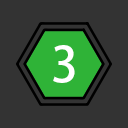
<style>
.page{position:relative;width:128px;height:128px;background:#333333}
.page>*{position:absolute;margin:0}
.t1{font:48px "AdobeHeitiStd-Regular";color:#ffffff}
</style>
<div class="page">
<p class="t1" style="left:53px;top:45px;width:22px;height:38px">3</p>
</div>
